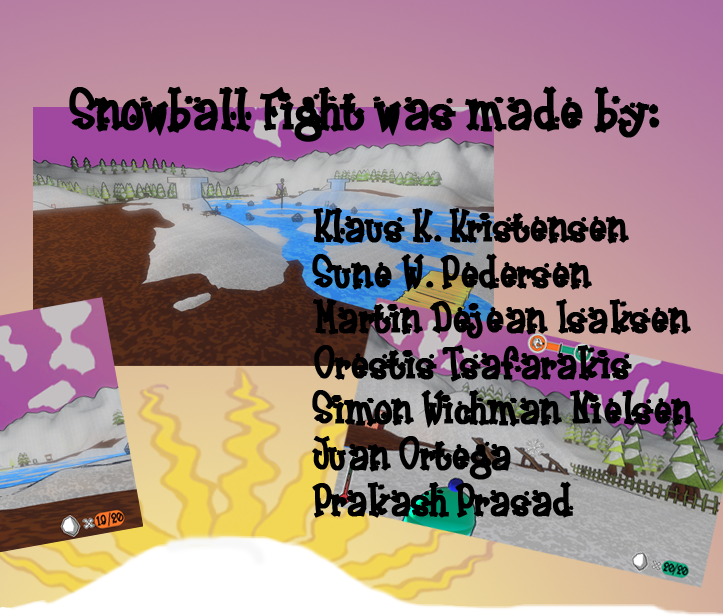
<style>
.page{position:relative;width:723px;height:616px}
.page>*{position:absolute;margin:0}
.t1{font:48px "Frosty";color:#000000;font-weight:bold}
.t2{font:38px "Frosty";color:#000000;font-weight:bold}
</style>
<div class="page">
<p class="t1" style="left:69px;top:86px;width:591px;height:56px">Snowball Fight was made by:</p>
<p class="t2" style="left:312px;top:208px;width:382px;height:310px">Klaus K. Kristensen<br>Sune W. Pedersen<br>Martin Dejean Isaksen<br>Orestis Tsafarakis<br>Simon Wichman Nielsen<br>Juan Ortega<br>Prakash Prasad</p>
</div>
